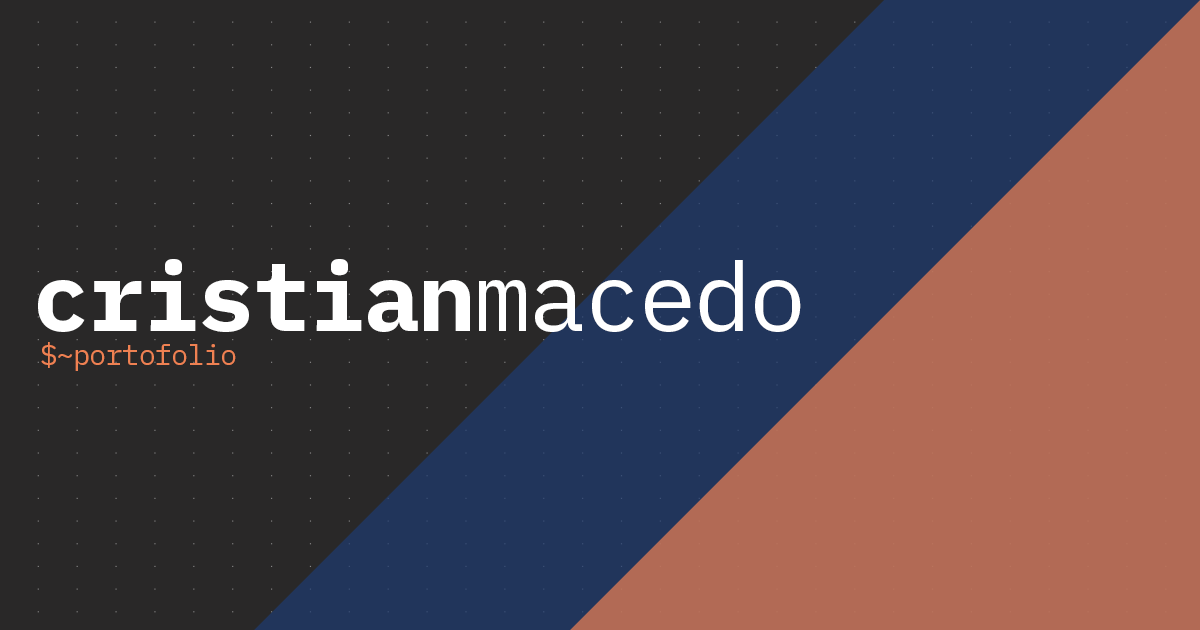
<style>
.page{position:relative;width:1200px;height:630px;background:#292828}
.page>*{position:absolute;margin:0}
.t1{font:96px "IBMPlexMono-Bold";letter-spacing:-0.025em;color:#ffffff}
.t2{font:96px "IBMPlexMono";letter-spacing:-0.025em;color:#ffffff}
.t3{font:28.5px "IBMPlexMono";letter-spacing:-0.025em;color:#ef8152}
</style>
<div class="page">
<p class="t1" style="left:38px;top:259px;width:763px;height:73px">cristian<span class="t2">macedo</span></p>
<p class="t3" style="left:41px;top:342px;width:195px;height:29px">$~portofolio</p>
</div>
